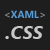
<style>
.page{position:relative;width:50px;height:50px;background:#1e1e1e}
.page>*{position:absolute;margin:0}
.t1{font:10px "SegoeUI-Bold";color:#569cd6}
.t2{font:10px "SegoeUI-Bold";color:#8a8a8a}
.t3{font:19px "SegoeUI-BoldItalic";color:#c8c8c8}
</style>
<div class="page">
<p class="t1" style="left:5px;top:10px;width:40px;height:8px"><span class="t2">&lt;</span>XAML<span class="t2">&gt;</span></p>
<p class="t3" style="left:5px;top:26px;width:38px;height:13px">.CSS</p>
</div>
